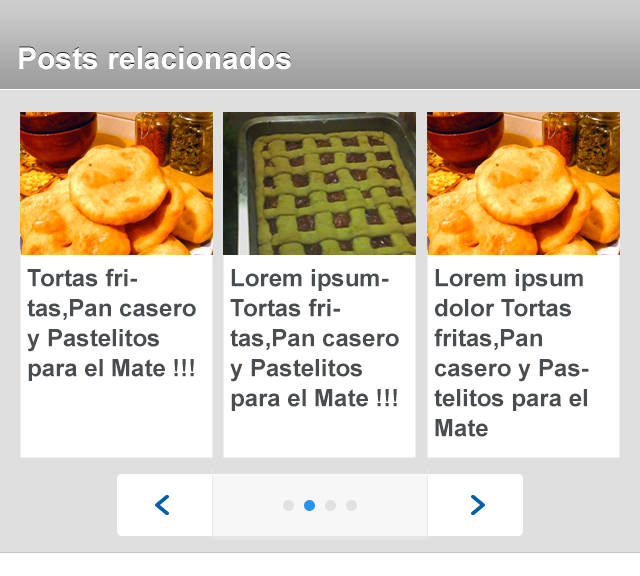
<style>
.page{position:relative;width:640px;height:576px;background:#ffffff}
.page>*{position:absolute;margin:0}
.t1{font:30px "Arial-BoldMT";color:#ffffff}
.t2{font:24px/30px "Arial-BoldMT";color:#494d50}
</style>
<div class="page">
<p class="t1" style="left:19px;top:47px;width:272px;height:23px">Posts relacionados</p>
<p class="t2" style="left:27px;top:268px;width:169px;height:113px">Tortas fritas,Pan casero y Pastelitos para el Mate !!!</p>
<p class="t2" style="left:230px;top:269px;width:169px;height:142px">Lorem ipsumTortas fritas,Pan casero y Pastelitos para el Mate !!!</p>
<p class="t2" style="left:434px;top:269px;width:155px;height:168px">Lorem ipsum dolor Tortas fritas,Pan casero y Pastelitos para el Mate</p>
</div>
